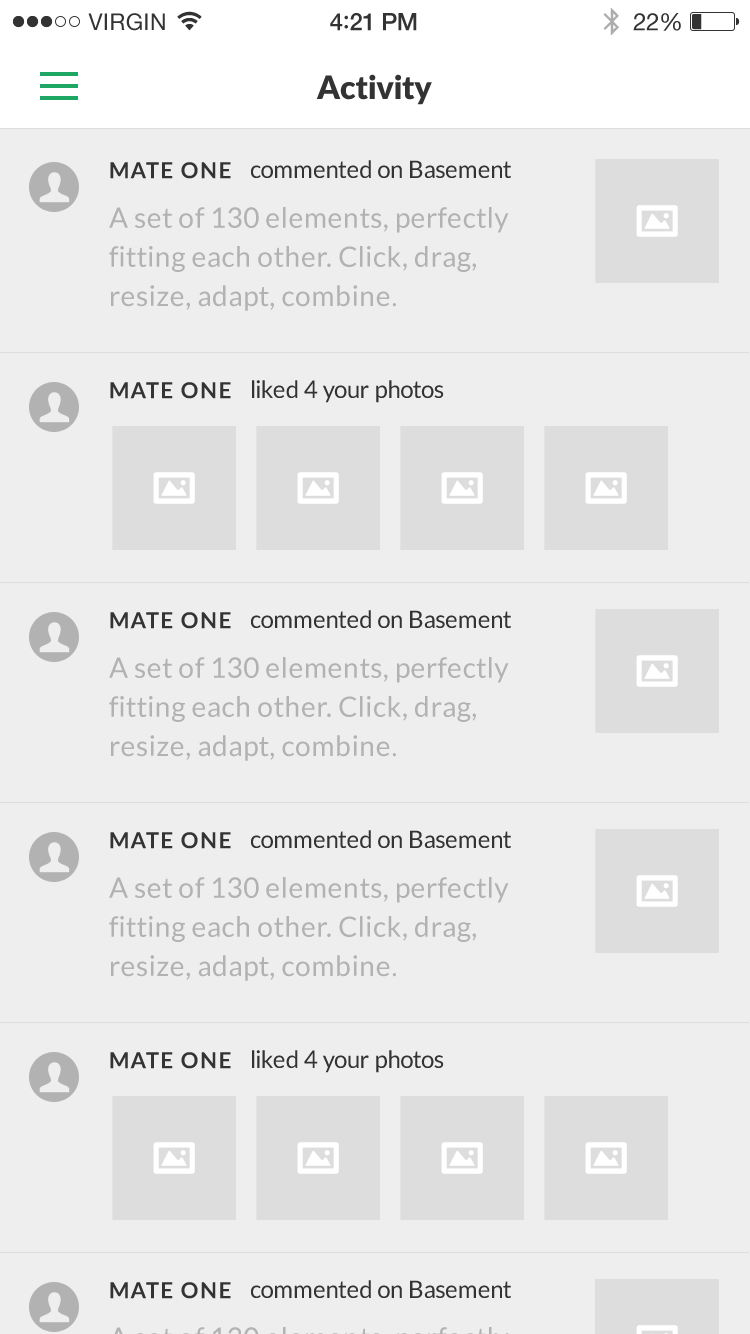
<style>
.page{position:relative;width:750px;height:1334px;background:#eeeeee}
.page>*{position:absolute;margin:0}
.t1{font:32px "Lato-Black";letter-spacing:-0.02em;color:#333333}
.t2{font:24px "Lato-Regular";color:#333333}
.t3{font:22px "Lato-Bold";letter-spacing:0.07em;color:#333333}
.t4{font:28px/39.2px "Lato-Regular";letter-spacing:0.02em;color:#b2b2b2}
.t5{font:28px/39.2px "MinionPro-Regular";letter-spacing:0.02em;color:#b2b2b2}
</style>
<div class="page">
<p class="t1" style="left:316px;top:74px;width:116px;height:31px">Activity</p>
<p class="t2" style="left:251px;top:160px;width:260px;height:18px">commented on Basement</p>
<p class="t3" style="left:110px;top:162px;width:121px;height:17px">MATE ONE</p>
<p class="t4" style="left:109px;top:207px;width:400px;height:104px">A set of 130 elements, perfectly<br>fitting each other. Click, drag,<br>resize, adapt, combine<span class="t5">.</span></p>
<p class="t3" style="left:110px;top:382px;width:121px;height:17px">MATE ONE</p>
<p class="t2" style="left:252px;top:380px;width:192px;height:23px">liked 4 your photos</p>
<p class="t3" style="left:110px;top:612px;width:121px;height:17px">MATE ONE</p>
<p class="t2" style="left:251px;top:610px;width:260px;height:18px">commented on Basement</p>
<p class="t4" style="left:109px;top:657px;width:400px;height:104px">A set of 130 elements, perfectly<br>fitting each other. Click, drag,<br>resize, adapt, combine<span class="t5">.</span></p>
<p class="t3" style="left:110px;top:832px;width:121px;height:17px">MATE ONE</p>
<p class="t2" style="left:251px;top:830px;width:260px;height:18px">commented on Basement</p>
<p class="t4" style="left:109px;top:877px;width:400px;height:104px">A set of 130 elements, perfectly<br>fitting each other. Click, drag,<br>resize, adapt, combine<span class="t5">.</span></p>
<p class="t3" style="left:110px;top:1052px;width:121px;height:17px">MATE ONE</p>
<p class="t2" style="left:252px;top:1050px;width:192px;height:23px">liked 4 your photos</p>
<p class="t3" style="left:110px;top:1282px;width:121px;height:17px">MATE ONE</p>
<p class="t2" style="left:251px;top:1280px;width:260px;height:18px">commented on Basement</p>
</div>
